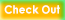
<style>
.page{position:relative;width:65px;height:20px}
.page>*{position:absolute;margin:0}
.t1{font:11.3px "CenturyGothic-Bold";color:#fdfdfd;scale:0.93 1}
</style>
<div class="page">
<p class="t1" style="left:4px;top:5px;width:56px;height:9px">Check Out</p>
</div>
